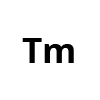
<style>
.page{position:relative;width:100px;height:100px;background:#ffffff}
.page>*{position:absolute;margin:0}
.t1{font:35px "OpenSans-Bold";color:#000000}
</style>
<div class="page">
<p class="t1" style="left:22px;top:38px;width:52px;height:25px">Tm</p>
</div>
